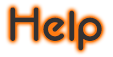
<style>
.page{position:relative;width:113px;height:57px;background:#ffffff}
.page>*{position:absolute;margin:0}
.t1{font:48px "Neon80s";color:#343232}
</style>
<div class="page">
<p class="t1" style="left:10px;top:7px;width:92px;height:44px">Help</p>
</div>
